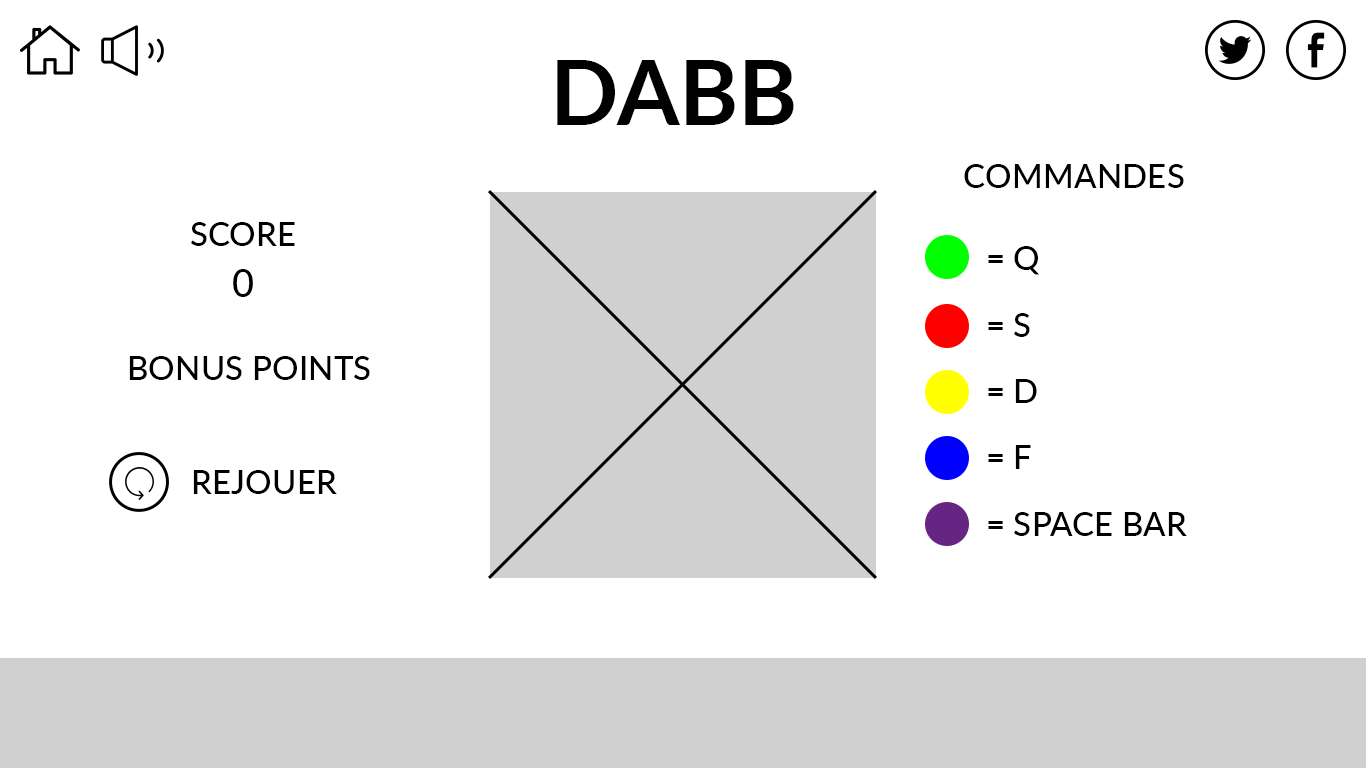
<style>
.page{position:relative;width:1366px;height:768px;background:#ffffff}
.page>*{position:absolute;margin:0}
.t1{font:90px "Lato-Bold";color:#010101}
.t2{font:33.3px "Lato-Medium";color:#000000}
.t3{font:37.5px "Lato-Medium";color:#000000}
</style>
<div class="page">
<p class="t1" style="left:557px;top:60px;width:237px;height:65px">DABB</p>
<p class="t2" style="left:964px;top:164px;width:220px;height:24px">COMMANDES</p>
<p class="t2" style="left:191px;top:222px;width:104px;height:24px">SCORE</p>
<p class="t2" style="left:988px;top:246px;width:52px;height:29px">= Q</p>
<p class="t3" style="left:233px;top:269px;width:20px;height:28px">0</p>
<p class="t2" style="left:988px;top:313px;width:42px;height:24px">= S</p>
<p class="t2" style="left:129px;top:356px;width:241px;height:24px">BONUS POINTS</p>
<p class="t2" style="left:988px;top:379px;width:49px;height:24px">= D</p>
<p class="t2" style="left:988px;top:445px;width:43px;height:24px">= F</p>
<p class="t2" style="left:193px;top:470px;width:144px;height:24px">REJOUER</p>
<p class="t2" style="left:988px;top:512px;width:199px;height:24px">= SPACE BAR</p>
</div>
